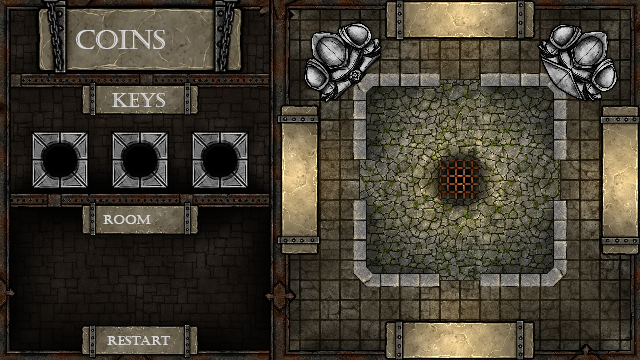
<style>
.page{position:relative;width:640px;height:360px}
.page>*{position:absolute;margin:0}
.t1{font:26.7px "Castellar";color:#d9d9d9}
.t2{font:20px "Castellar";color:#d9d9d9}
.t3{font:13.3px "Castellar";color:#d9d9d9}
</style>
<div class="page">
<p class="t1" style="left:76px;top:30px;width:89px;height:19px">COINS</p>
<p class="t2" style="left:111px;top:93px;width:54px;height:14px">KEYS</p>
<p class="t3" style="left:103px;top:215px;width:48px;height:9px">ROOM</p>
<p class="t3" style="left:107px;top:336px;width:64px;height:9px">RESTART</p>
</div>
